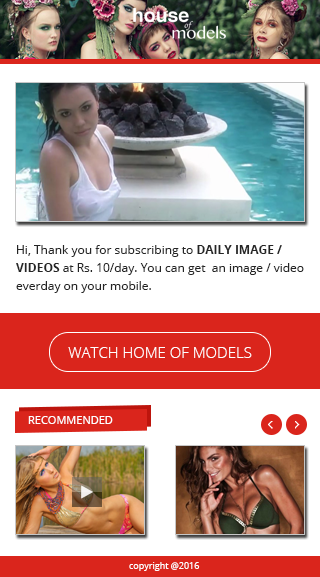
<style>
.page{position:relative;width:320px;height:577px;background:#ffffff}
.page>*{position:absolute;margin:0}
.t1{font:12px/18px "OpenSans";color:#252525}
.t2{font:12px/18px "OpenSans-Bold";color:#252525}
.t3{font:15px "OpenSans-Light";color:#fffefe}
.t4{font:11px "OpenSans";color:#ffffff}
.t5{font:9px "OpenSans";color:#fefefe}
</style>
<div class="page">
<p class="t1" style="left:16px;top:245px;width:288px;height:48px">Hi, Thank you for subscribing to <span class="t2">DAILY IMAGE / VIDEOS</span> at Rs. 10/day. You can get  an image / video everday on your mobile.</p>
<p class="t3" style="left:68px;top:347px;width:184px;height:11px">WATCH HOME OF MODELS</p>
<p class="t4" style="left:28px;top:416px;width:85px;height:8px">RECOMMENDED</p>
<p class="t5" style="left:129px;top:562px;width:71px;height:9px">copyright @2016</p>
</div>
